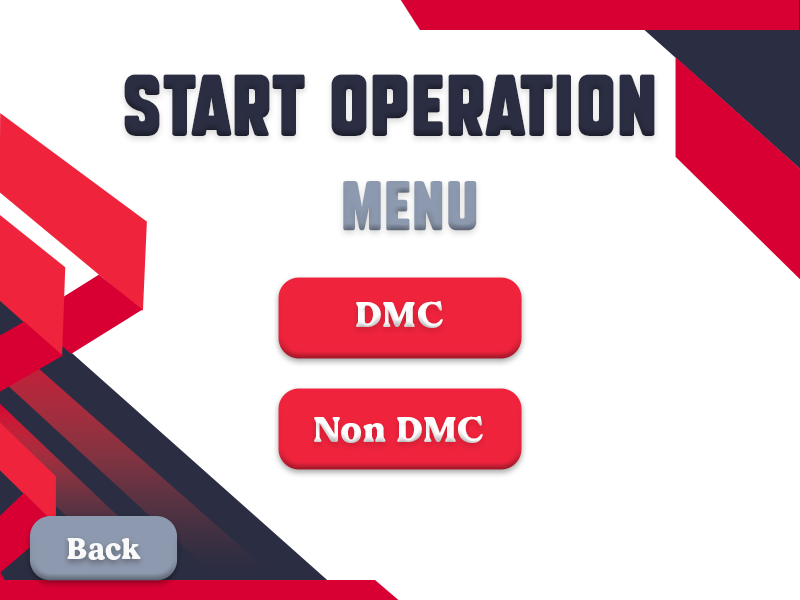
<style>
.page{position:relative;width:800px;height:600px;background:#ffffff}
.page>*{position:absolute;margin:0}
.t1{font:60px "SubtleCurves";letter-spacing:0.025em;color:#2b2d42}
.t2{font:48px "SubtleCurves";letter-spacing:0.025em;color:#8d99ae}
.t3{font:36px "MADEDillan";letter-spacing:0.025em;color:#ffffff}
.t4{font:30px "MADEDillan";letter-spacing:0.025em;color:#f9f9f9}
</style>
<div class="page">
<p class="t1" style="left:124px;top:74px;width:531px;height:62px">start operation</p>
<p class="t2" style="left:343px;top:181px;width:134px;height:50px">Menu</p>
<p class="t3" style="left:356px;top:301px;width:87px;height:27px">DMC</p>
<p class="t3" style="left:314px;top:416px;width:169px;height:27px">Non DMC</p>
<p class="t4" style="left:67px;top:538px;width:74px;height:22px">Back</p>
</div>
